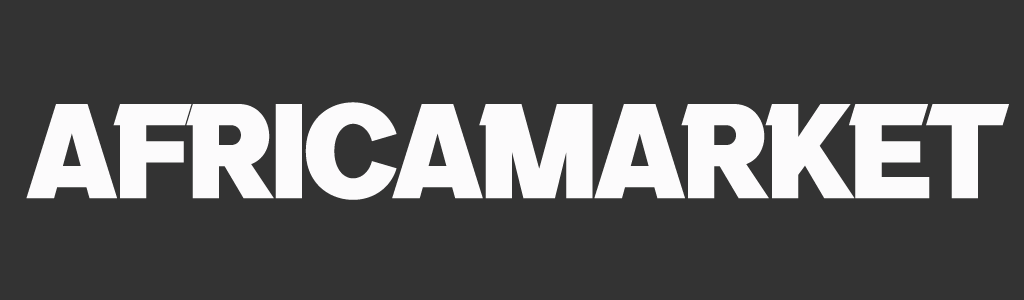
<style>
.page{position:relative;width:1024px;height:300px;background:#333333}
.page>*{position:absolute;margin:0}
.t1{font:127.7px "aBlackLives";letter-spacing:-0.025em;color:#fcfbfc}
</style>
<div class="page">
<p class="t1" style="left:26px;top:102px;width:983px;height:98px">AFRICAMARKET</p>
</div>
